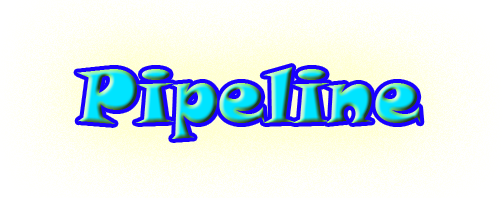
<style>
.page{position:relative;width:504px;height:198px}
.page>*{position:absolute;margin:0}
.t1{font:74.3px "SnapITC-Regular"}
</style>
<div class="page">
<p class="t1" style="left:77px;top:67px;width:344px;height:72px">Pipeline</p>
</div>
